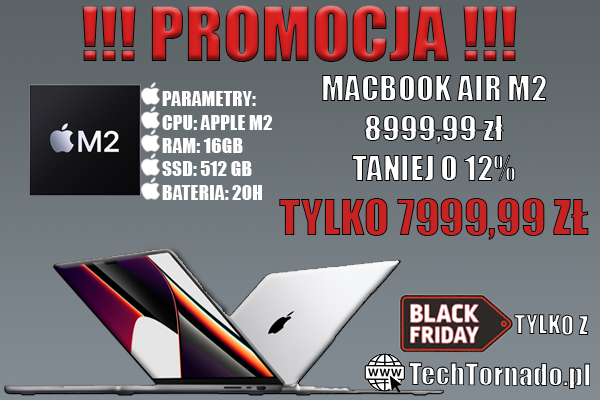
<style>
.page{position:relative;width:600px;height:400px}
.page>*{position:absolute;margin:0}
.t1{font:70.4px "Impact"}
.t2{font:33px "Impact";color:#ffffff}
.t3{font:45.5px "Impact";color:#c82323;text-transform:uppercase}
.t4{font:19.5px "Impact";color:#fefefe}
</style>
<div class="page">
<p class="t1" style="left:82px;top:5px;width:435px;height:57px">!!! PROMOCJA !!!</p>
<p class="t2" style="left:279px;top:75px;width:310px;height:165px;text-align:center">MACBOOK AIR M2<br>8999,99 zł<br>TANIEJ O 12%<br><span class="t3">TYLKO 7999,99 zł</span></p>
<p class="t4" style="left:162px;top:91px;width:110px;height:109px">PARAMETRY:<br>CPU: APPLE M2<br>RAM: 16GB<br>SSD: 512 GB<br>BATERIA: 20H</p>
</div>
